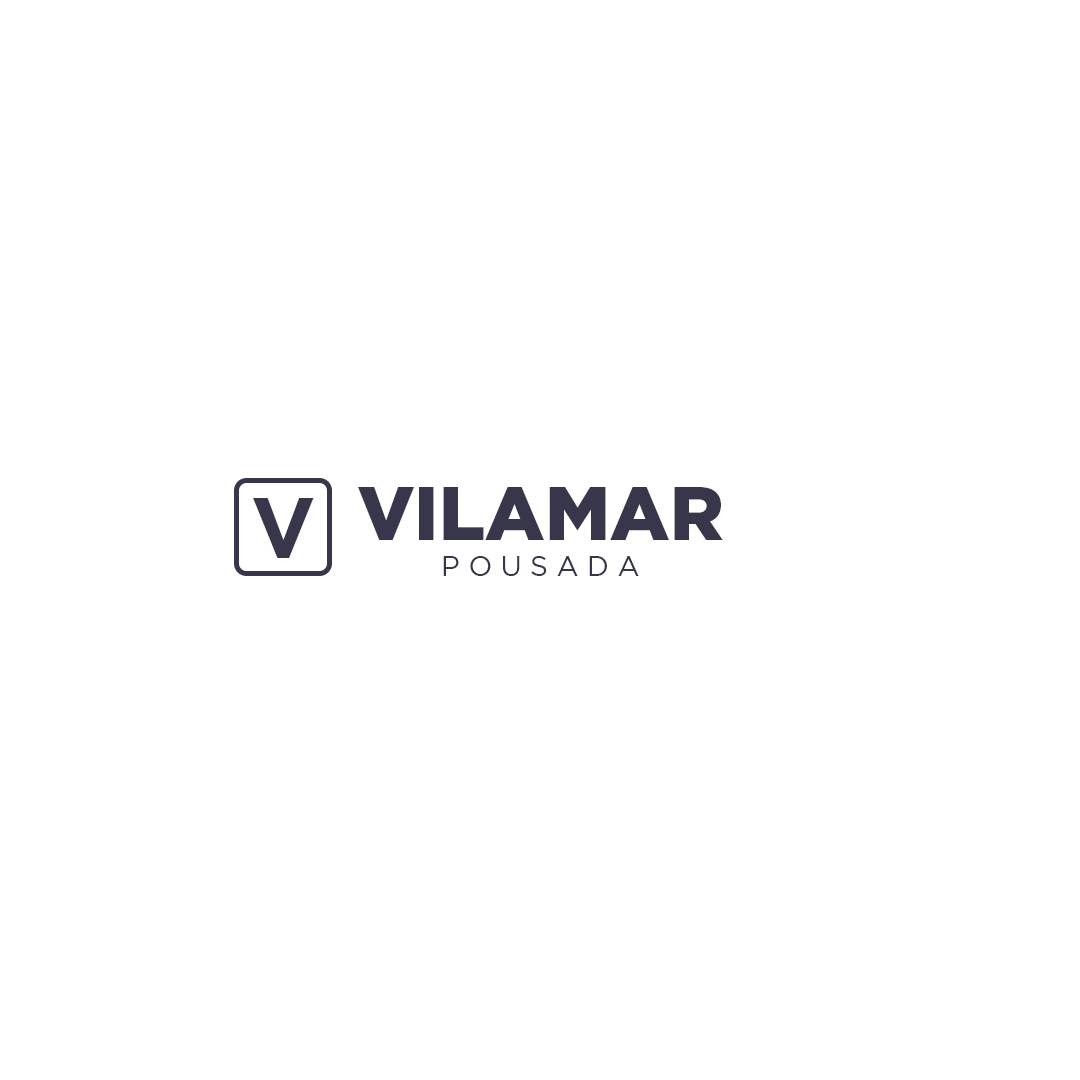
<style>
.page{position:relative;width:1080px;height:1080px;background:#ffffff}
.page>*{position:absolute;margin:0}
.t1{font:75px "Gotham-Black";color:#37364a}
.t2{font:86.1px "Gotham-Bold";color:#37364a}
.t3{font:28px "Gotham-Book";color:#37364a}
</style>
<div class="page">
<p class="t1" style="left:358px;top:487px;width:365px;height:53px">VILAMAR</p>
<p class="t1" style="left:358px;top:487px;width:365px;height:53px">VILAMAR</p>
<p class="t2" style="left:253px;top:498px;width:61px;height:60px">V</p>
<p class="t2" style="left:253px;top:498px;width:61px;height:60px">V</p>
<p class="t3" style="left:443px;top:556px;width:196px;height:20px">P O U S A D A</p>
<p class="t3" style="left:443px;top:556px;width:196px;height:20px">P O U S A D A</p>
</div>
